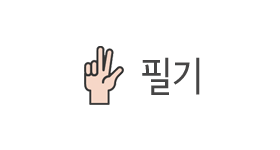
<style>
.page{position:relative;width:280px;height:150px;background:#ffffff}
.page>*{position:absolute;margin:0}
.t1{font:40px "SeN-CM";color:#464545}
</style>
<div class="page">
<p class="t1" style="left:142px;top:57px;width:58px;height:38px">필기</p>
</div>
